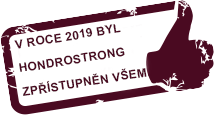
<style>
.page{position:relative;width:214px;height:115px;background:#ffffff}
.page>*{position:absolute;margin:0}
.t1{font:12px/24px "Arial-BoldMT";letter-spacing:0.02em;color:#4a0a21;text-transform:uppercase}
</style>
<div class="page">
<p class="t1" style="left:14px;top:24px;width:136px;height:72px;rotate:-9deg">V ROCE 2019 BYL <br>HONDROSTRONG <br>ZPŘÍSTUPNĚN VŠEM.</p>
</div>
